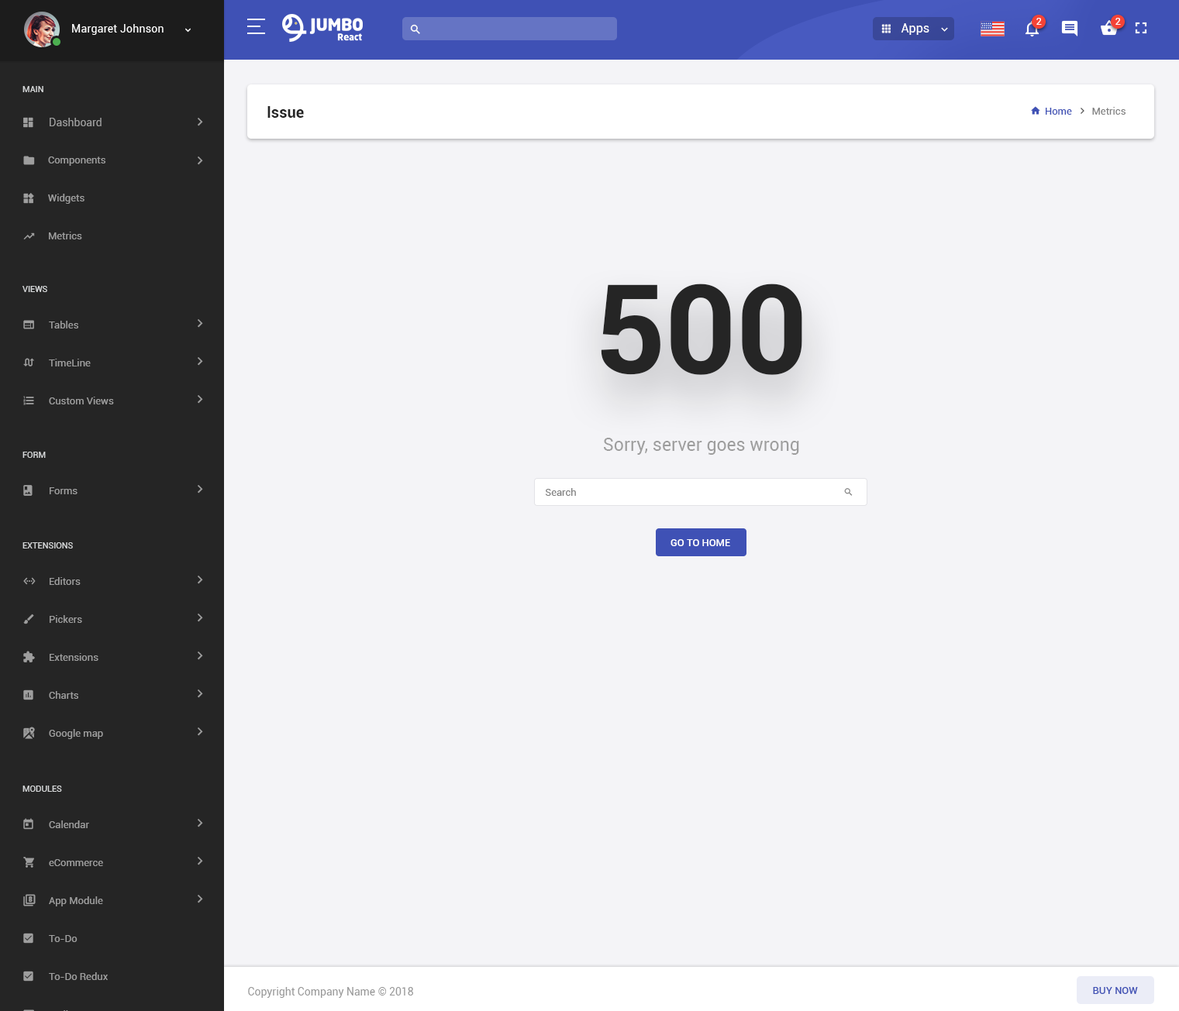
<style>
.page{position:relative;width:1179px;height:1011px;background:#f4f4f7}
.page>*{position:absolute;margin:0}
.t1{font:10.1px "Roboto-Regular";color:#ffffff}
.t2{font:10.9px "Roboto-Regular";letter-spacing:0.02em;color:#fafafa}
.t3{font:12.4px "Roboto-Regular";color:#ffffff}
.t4{font:8.5px "Roboto-Regular";color:#d6d8d9;text-transform:uppercase}
.t5{font:15.5px "Roboto-Bold";color:#252525}
.t6{font:10.1px "Roboto-Regular";color:#808080}
.t7{font:10.1px "Roboto-Regular";color:#3f51b5}
.t8{font:10.9px "Roboto-Regular";color:#9e9e9e}
.t9{font:10.1px/38px "Roboto-Regular";color:#9e9e9e}
.t10{font:124px "Roboto-Bold";color:#252525}
.t11{font:17.8px "Roboto-Regular";color:#9e9e9e}
.t12{font:10.1px "Roboto-Regular";color:#9e9e9e}
.t13{font:10.1px "Roboto-Medium";color:#ffffff;text-transform:uppercase}
.t14{font:10.9px "Roboto-Regular";color:#999999}
.t15{font:10.1px "Roboto-Medium";color:#3f51b5;text-transform:uppercase}
</style>
<div class="page">
<p class="t1" style="left:1036px;top:18px;width:6px;height:7px">2</p>
<p class="t1" style="left:1115px;top:18px;width:6px;height:7px">2</p>
<p class="t2" style="left:72px;top:24px;width:92px;height:11px">Margaret Johnson</p>
<p class="t3" style="left:901px;top:23px;width:28px;height:12px">Apps</p>
<p class="t4" style="left:22px;top:86px;width:21px;height:6px">main</p>
<p class="t5" style="left:267px;top:106px;width:37px;height:12px">Issue</p>
<p class="t6" style="left:1046px;top:107px;width:79px;height:8px"><span class="t7">Home       </span> Metrics</p>
<p class="t8" style="left:50px;top:118px;width:52px;height:8px">Dashboard</p>
<p class="t9" style="left:48px;top:157px;width:57px;height:83px">Components<br>Widgets<br>Metrics</p>
<p class="t4" style="left:22px;top:286px;width:25px;height:6px">Views</p>
<p class="t10" style="left:601px;top:284px;width:201px;height:91px">500</p>
<p class="t9" style="left:49px;top:321px;width:65px;height:84px">Tables<br>TimeLine<br>Custom Views</p>
<p class="t11" style="left:604px;top:438px;width:195px;height:17px">Sorry, server goes wrong</p>
<p class="t4" style="left:22px;top:452px;width:24px;height:6px">FORM</p>
<p class="t12" style="left:50px;top:488px;width:28px;height:7px">Forms</p>
<p class="t6" style="left:545px;top:488px;width:31px;height:8px">Search</p>
<p class="t4" style="left:22px;top:543px;width:51px;height:6px">Extensions</p>
<p class="t13" style="left:670px;top:539px;width:60px;height:7px">Go to home</p>
<p class="t9" style="left:49px;top:577px;width:54px;height:162px">Editors<br>Pickers<br>Extensions<br>Charts<br>Google map</p>
<p class="t4" style="left:22px;top:786px;width:40px;height:6px">Modules</p>
<p class="t14" style="left:248px;top:987px;width:165px;height:11px">Copyright Company Name © 2018</p>
<p class="t15" style="left:1093px;top:987px;width:45px;height:7px">Buy Now</p>
</div>
